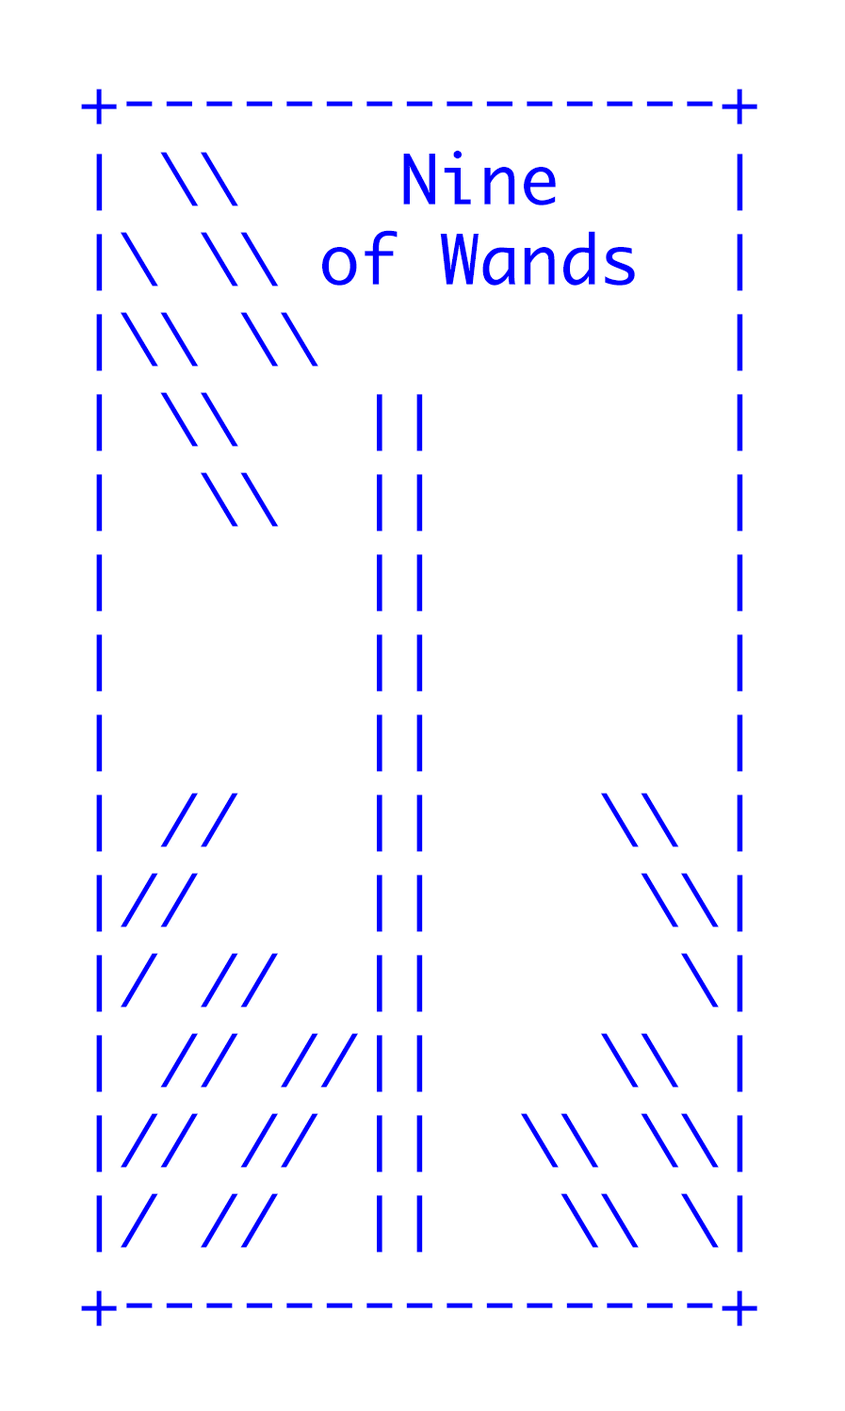
<style>
.page{position:relative;width:845px;height:1411px;background:#ffffff}
.page>*{position:absolute;margin:0}
.t1{font:66.7px "Monaco";color:#0000ff}
</style>
<div class="page">
<p class="t1" style="left:81px;top:89px;width:677px;height:1237px">+---------------+<br>│ \\    Nine    │<br>│\ \\ of Wands  │<br>│\\ \\          │<br>│ \\   ││       │<br>│  \\  ││       │<br>│      ││       │<br>│      ││       │ <br>│      ││       │ <br>│ //   ││    \\ │<br>│//    ││     \\│ <br>│/ //  ││      \│ <br>│ // //││    \\ │<br>│// // ││  \\ \\│<br>│/ //  ││   \\ \│<br>+---------------+</p>
</div>
